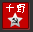
<style>
.page{position:relative;width:33px;height:32px;background:#c50000}
.page>*{position:absolute;margin:0}
.t1{font:10.4px "SimSun";color:#ffffff}
</style>
<div class="page">
<p class="t1" style="left:6px;top:4px;width:19px;height:9px">十野</p>
</div>
